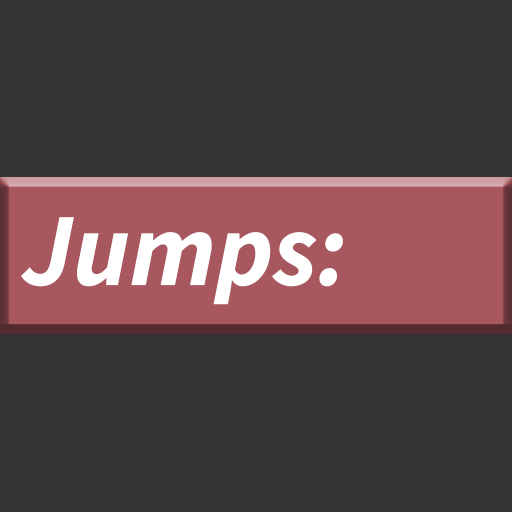
<style>
.page{position:relative;width:512px;height:512px;background:#333333}
.page>*{position:absolute;margin:0}
.t1{font:104px "SourceSansItalic-BoldItalic";color:#ffffff}
</style>
<div class="page">
<p class="t1" style="left:21px;top:217px;width:322px;height:88px">Jumps:</p>
</div>
